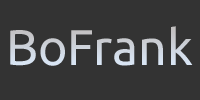
<style>
.page{position:relative;width:200px;height:100px;background:#333333}
.page>*{position:absolute;margin:0}
.t1{font:50px "Ubuntu";color:#d0d6e0}
</style>
<div class="page">
<p class="t1" style="left:10px;top:26px;width:183px;height:40px">BoFrank</p>
</div>
